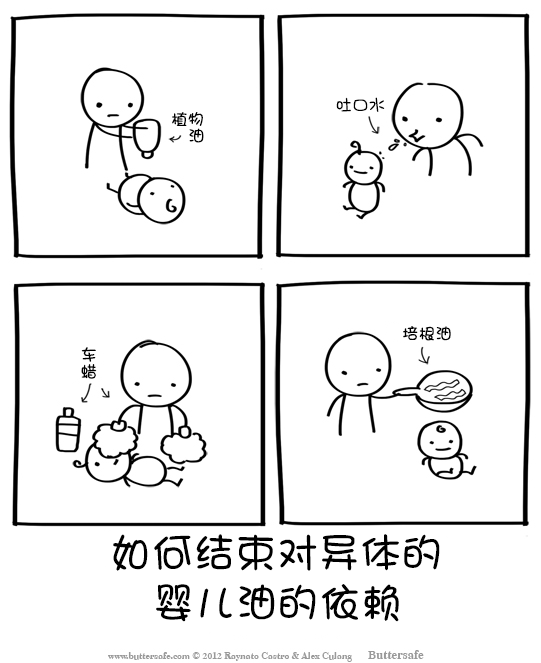
<style>
.page{position:relative;width:541px;height:663px;background:#ffffff}
.page>*{position:absolute;margin:0}
.t1{font:16.7px "DFShaoNvW5";color:#000000}
.t2{font:16.7px/16.7px "DFShaoNvW5";color:#000000}
.t3{font:41.7px/50px "DFShaoNvW5";color:#000000}
</style>
<div class="page">
<p class="t1" style="left:336px;top:97px;width:49px;height:15px">吐口水</p>
<p class="t2" style="left:172px;top:112px;width:32px;height:31px">植物<br>  油</p>
<p class="t1" style="left:403px;top:326px;width:48px;height:15px">培根油</p>
<p class="t2" style="left:81px;top:347px;width:16px;height:32px">车<br>蜡</p>
<p class="t3" style="left:113px;top:534px;width:327px;height:88px">如何结束对异体的<br>  婴儿油的依赖</p>
</div>
